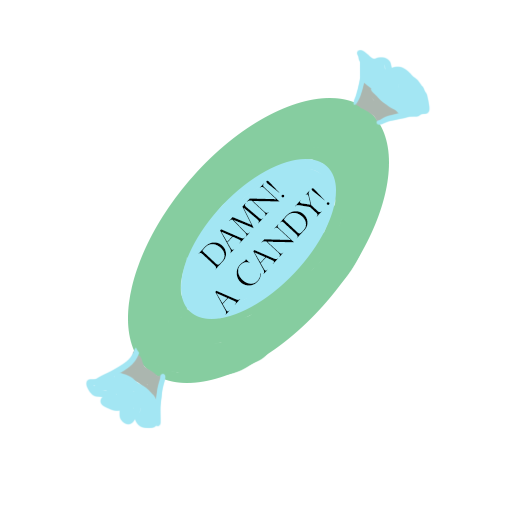
<style>
.page{position:relative;width:512px;height:512px;background:#ffffff}
.page>*{position:absolute;margin:0}
.t1{font:31.9px "PerpetuaTitlingMT-Light";color:#000000}
</style>
<div class="page">
<p class="t1" style="left:198px;top:180px;width:132px;height:135px;text-align:center;rotate:-47deg">Damn!<br>a candy!</p>
</div>
